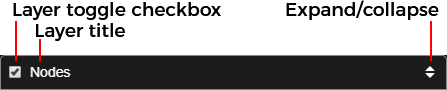
<style>
.page{position:relative;width:447px;height:90px;background:#ffffff}
.page>*{position:absolute;margin:0}
.t1{font:18.7px/21.3px "Montserrat-Regular";color:#000000}
.t2{font:18.7px "Montserrat-Regular";color:#000000}
</style>
<div class="page">
<p class="t1" style="left:13px;top:2px;width:208px;height:39px">Layer toggle checkbox<br>    Layer title</p>
<p class="t2" style="left:286px;top:0px;width:153px;height:20px">Expand/collapse</p>
</div>
